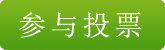
<style>
.page{position:relative;width:165px;height:50px}
.page>*{position:absolute;margin:0}
.t1{font:28px "NSimSun";letter-spacing:0.15em;color:#ffffff}
</style>
<div class="page">
<p class="t1" style="left:19px;top:12px;width:123px;height:26px">参与投票</p>
</div>
